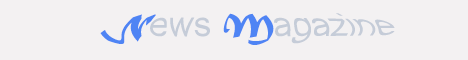
<style>
.page{position:relative;width:468px;height:60px;background:#f3f1f2}
.page>*{position:absolute;margin:0}
.t1{font:28px "ArialMT";color:#c5ccd8}
.t2{font:28px "MaturaMTScriptCapitals";color:#000000}
.t3{font:28px "MaturaMTScriptCapitals";color:#4e84f4}
</style>
<div class="page">
<p class="t1" style="left:100px;top:13px;width:295px;height:32px"><span class="t2">     </span><span class="t3">N</span>ews <span class="t3">M</span>agazine</p>
</div>
